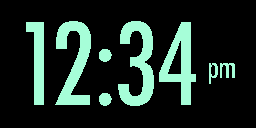
<style>
.page{position:relative;width:256px;height:128px;background:#000000}
.page>*{position:absolute;margin:0}
.t1{font:109.8px "Futura-CondensedMedium";letter-spacing:-0.02em;color:#a6fed8}
.t2{font:30px "Futura-CondensedMedium";letter-spacing:-0.02em;color:#a6fed8}
</style>
<div class="page">
<p class="t1" style="left:26px;top:21px;width:170px;height:85px">12:34</p>
<p class="t2" style="left:209px;top:63px;width:26px;height:21px">pm</p>
</div>
